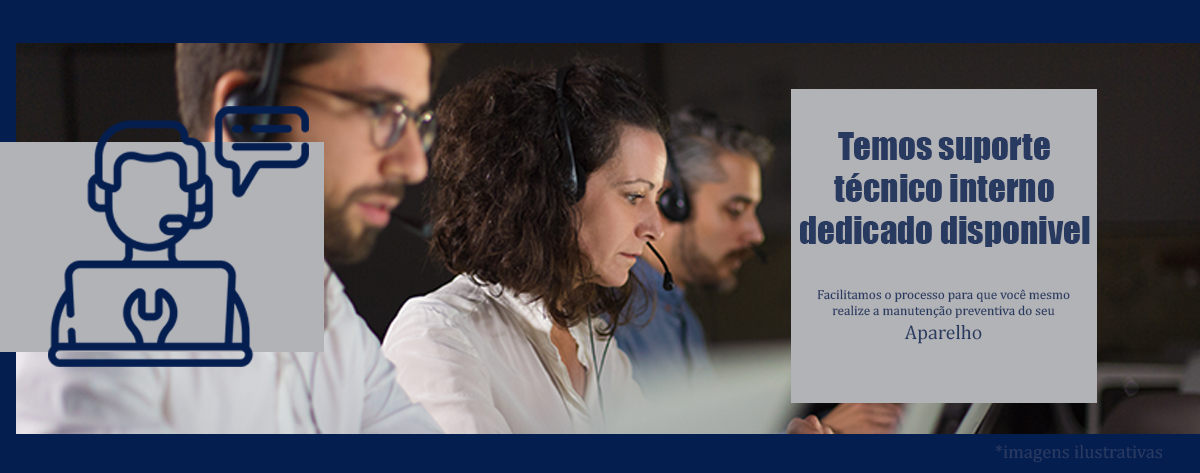
<style>
.page{position:relative;width:1200px;height:473px;background:#b2b3b7}
.page>*{position:absolute;margin:0}
.t1{font:35px "Impact";color:#293a61}
.t2{font:13.3px "Cambria";color:#293a61}
.t3{font:19.9px "Cambria";color:#293a61}
.t4{font:18.8px "Cambria";color:#293a61}
</style>
<div class="page">
<p class="t1" style="left:800px;top:132px;width:290px;height:115px;text-align:center">Temos suporte<br>técnico interno<br>dedicado disponivel</p>
<p class="t2" style="left:817px;top:289px;width:253px;height:55px;text-align:center">Facilitamos o processo para que você mesmo<br> realize a manutenção preventiva do seu <br><span class="t3">Aparelho</span></p>
<p class="t4" style="left:995px;top:444px;width:168px;height:19px">*imagens ilustrativas</p>
</div>
